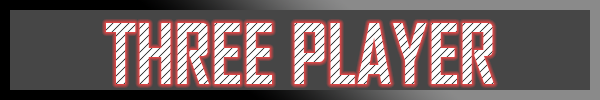
<style>
.page{position:relative;width:600px;height:100px;background:#464646}
.page>*{position:absolute;margin:0}
.t1{font:80px "AgencyFB-Bold"}
</style>
<div class="page">
<p class="t1" style="left:106px;top:23px;width:388px;height:61px">THREE PLAYER</p>
</div>
